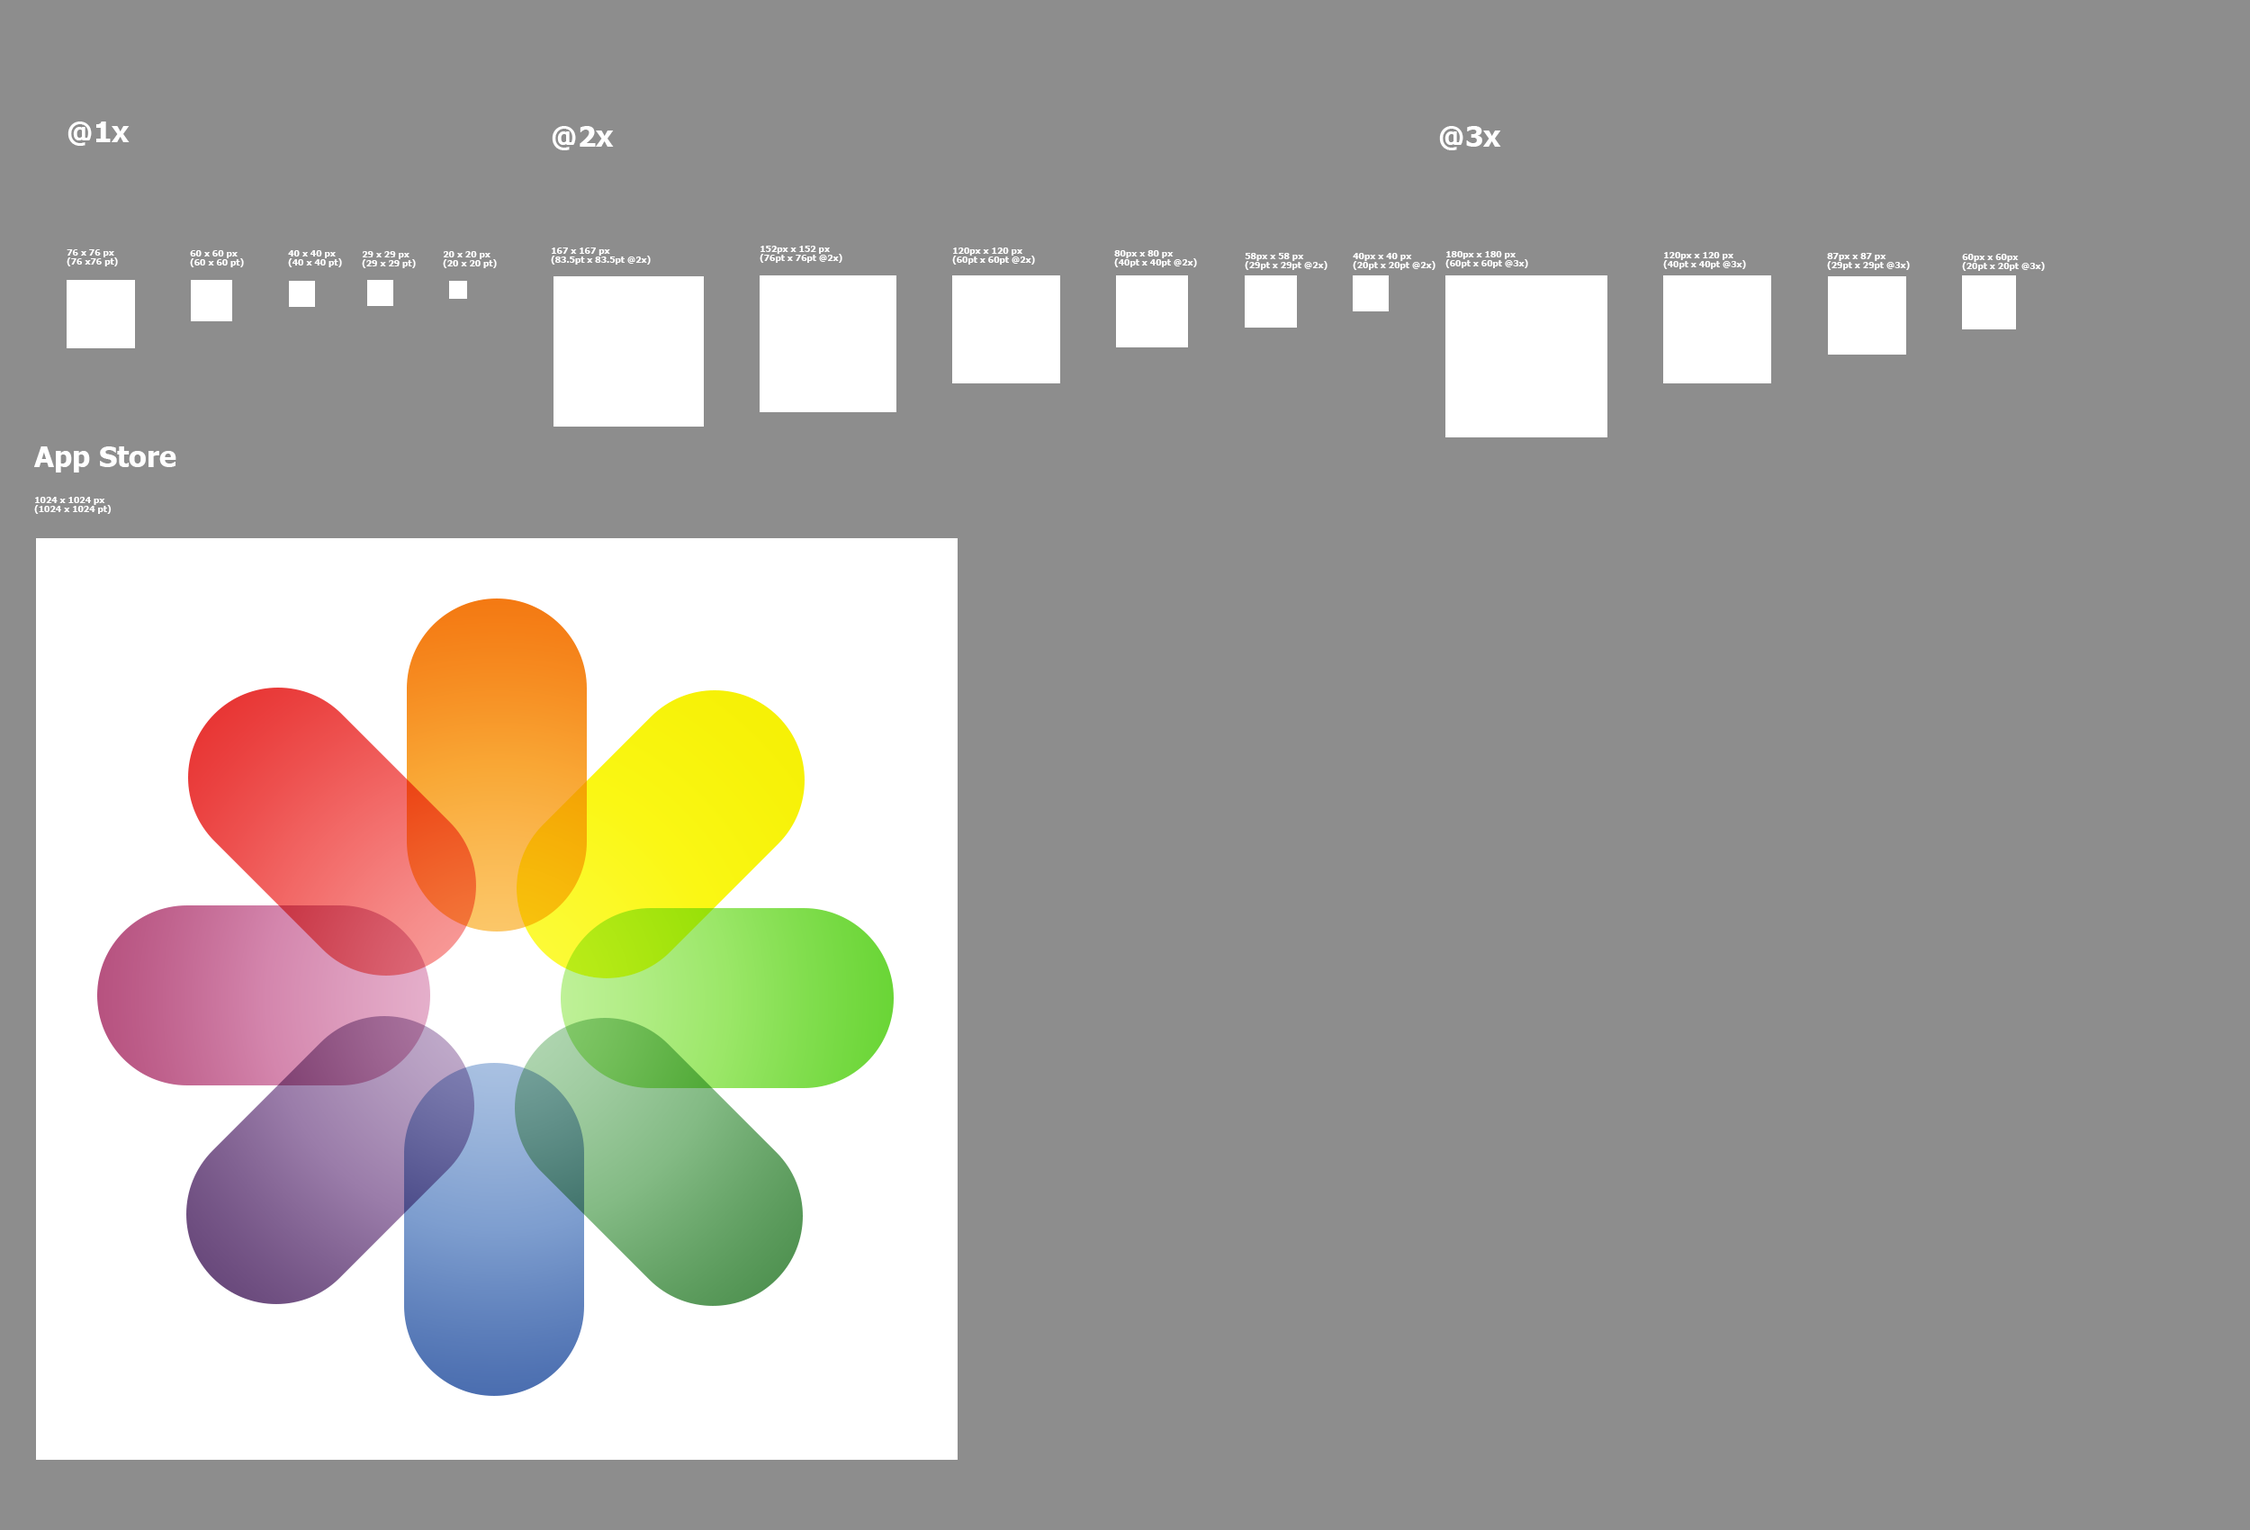
<style>
.page{position:relative;width:2250px;height:1530px;background:#8d8d8d}
.page>*{position:absolute;margin:0}
.t1{font:28.8px "Tahoma-Bold";color:#ffffff}
.t2{font:9px/9px "Tahoma-Bold";color:#ffffff}
</style>
<div class="page">
<p class="t1" style="left:68px;top:122px;width:62px;height:24px">@1x</p>
<p class="t1" style="left:552px;top:126px;width:62px;height:24px">@2x</p>
<p class="t1" style="left:1439px;top:126px;width:62px;height:24px">@3x</p>
<p class="t2" style="left:760px;top:246px;width:82px;height:17px">152px x 152 px<br>(76pt x 76pt @2x)</p>
<p class="t2" style="left:67px;top:249px;width:51px;height:17px">76 x 76 px<br>(76 x76 pt)</p>
<p class="t2" style="left:190px;top:250px;width:54px;height:17px">60 x 60 px<br>(60 x 60 pt)</p>
<p class="t2" style="left:288px;top:250px;width:54px;height:17px">40 x 40 px<br>(40 x 40 pt)</p>
<p class="t2" style="left:362px;top:251px;width:54px;height:17px">29 x 29 px<br>(29 x 29 pt)</p>
<p class="t2" style="left:443px;top:251px;width:54px;height:17px">20 x 20 px<br>(20 x 20 pt)</p>
<p class="t2" style="left:551px;top:248px;width:100px;height:17px">167 x 167 px<br>(83.5pt x 83.5pt @2x)</p>
<p class="t2" style="left:952px;top:248px;width:83px;height:17px">120px x 120 px<br>(60pt x 60pt @2x)</p>
<p class="t2" style="left:1114px;top:250px;width:83px;height:17px">80px x 80 px<br>(40pt x 40pt @2x)</p>
<p class="t2" style="left:1245px;top:253px;width:83px;height:17px">58px x 58 px<br>(29pt x 29pt @2x)</p>
<p class="t2" style="left:1353px;top:253px;width:83px;height:17px">40px x 40 px<br>(20pt x 20pt @2x)</p>
<p class="t2" style="left:1445px;top:251px;width:83px;height:17px">180px x 180 px<br>(60pt x 60pt @3x)</p>
<p class="t2" style="left:1663px;top:252px;width:83px;height:17px">120px x 120 px<br>(40pt x 40pt @3x)</p>
<p class="t2" style="left:1827px;top:253px;width:83px;height:17px">87px x 87 px<br>(29pt x 29pt @3x)</p>
<p class="t2" style="left:1962px;top:254px;width:83px;height:17px">60px x 60px<br>(20pt x 20pt @3x)</p>
<p class="t1" style="left:34px;top:446px;width:142px;height:26px">App Store</p>
<p class="t2" style="left:34px;top:497px;width:78px;height:17px">1024 x 1024 px<br>(1024 x 1024 pt)</p>
</div>
